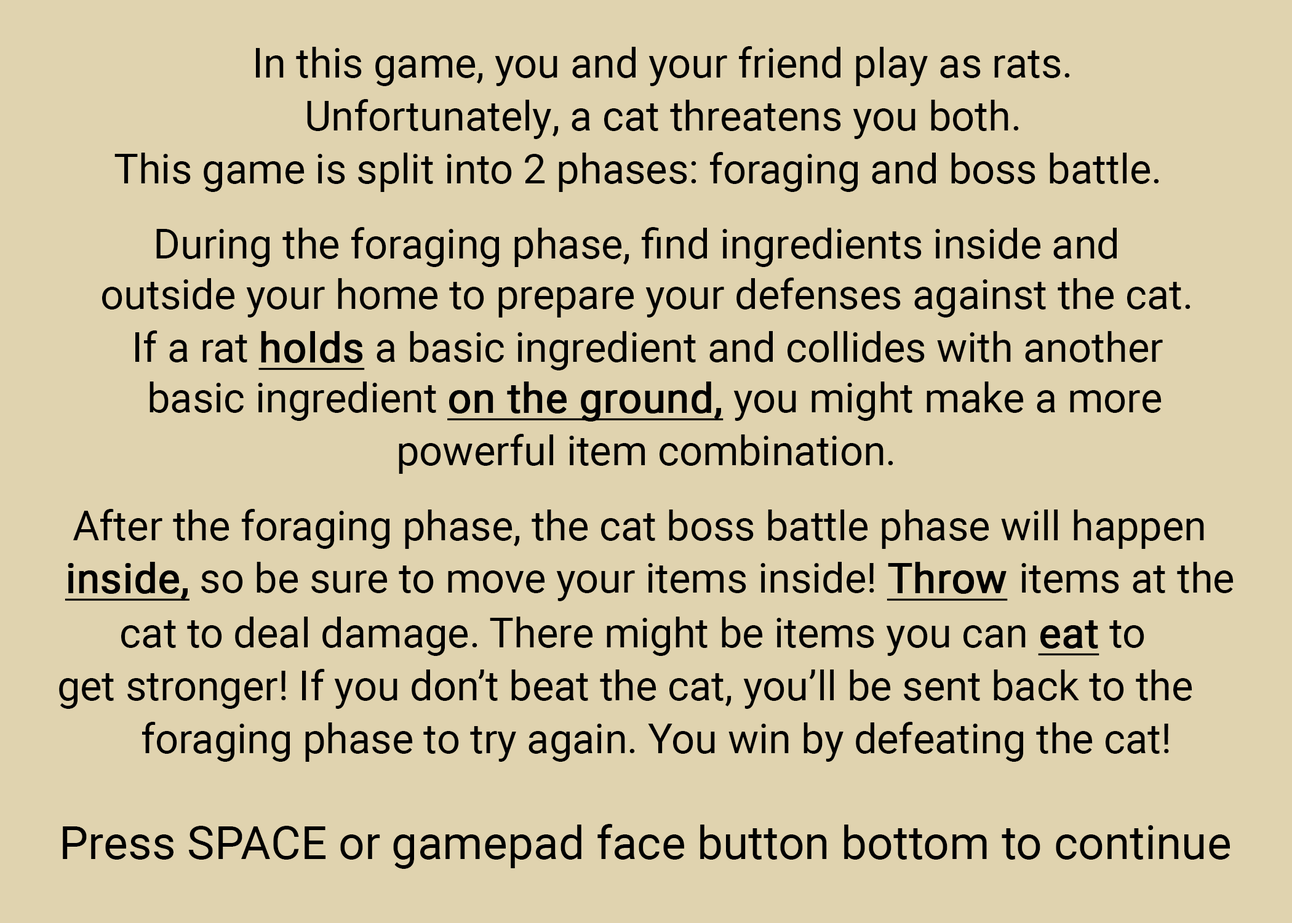
<style>
.page{position:relative;width:1292px;height:923px;background:#e0d3af}
.page>*{position:absolute;margin:0}
.t1{font:41px "Roboto-Regular";color:#000000}
.t2{font:41px "Roboto-Regular";color:#000000;font-weight:bold;text-decoration:underline}
.t3{font:46.1px "Roboto-Regular";color:#000000}
</style>
<div class="page">
<p class="t1" style="left:256px;top:46px;width:814px;height:40px">In this game, you and your friend play as rats.</p>
<p class="t1" style="left:307px;top:99px;width:712px;height:40px">Unfortunately, a cat threatens you both.</p>
<p class="t1" style="left:114px;top:152px;width:1045px;height:40px">This game is split into 2 phases: foraging and boss battle.</p>
<p class="t1" style="left:156px;top:227px;width:961px;height:40px">During the foraging phase, find ingredients inside and</p>
<p class="t1" style="left:102px;top:277px;width:1089px;height:40px">outside your home to prepare your defenses against the cat.</p>
<p class="t1" style="left:135px;top:330px;width:1028px;height:40px">If a rat <span class="t2">holds</span> a basic ingredient and collides with another</p>
<p class="t1" style="left:150px;top:381px;width:1012px;height:40px">basic ingredient <span class="t2">on the ground,</span> you might make a more</p>
<p class="t1" style="left:399px;top:434px;width:494px;height:40px">powerful item combination.</p>
<p class="t1" style="left:73px;top:509px;width:1131px;height:40px">After the foraging phase, the cat boss battle phase will happen</p>
<p class="t1" style="left:65px;top:562px;width:1169px;height:39px"><span class="t2">inside,</span> so be sure to move your items inside! <span class="t2">Throw </span>items at the</p>
<p class="t1" style="left:121px;top:616px;width:1023px;height:40px">cat to deal damage. There might be items you can <span class="t2">eat</span> to</p>
<p class="t1" style="left:59px;top:669px;width:1133px;height:40px">get stronger! If you don’t beat the cat, you’ll be sent back to the</p>
<p class="t1" style="left:142px;top:722px;width:1027px;height:40px">foraging phase to try again. You win by defeating the cat!</p>
<p class="t3" style="left:63px;top:824px;width:1167px;height:45px">Press SPACE or gamepad face button bottom to continue</p>
</div>
